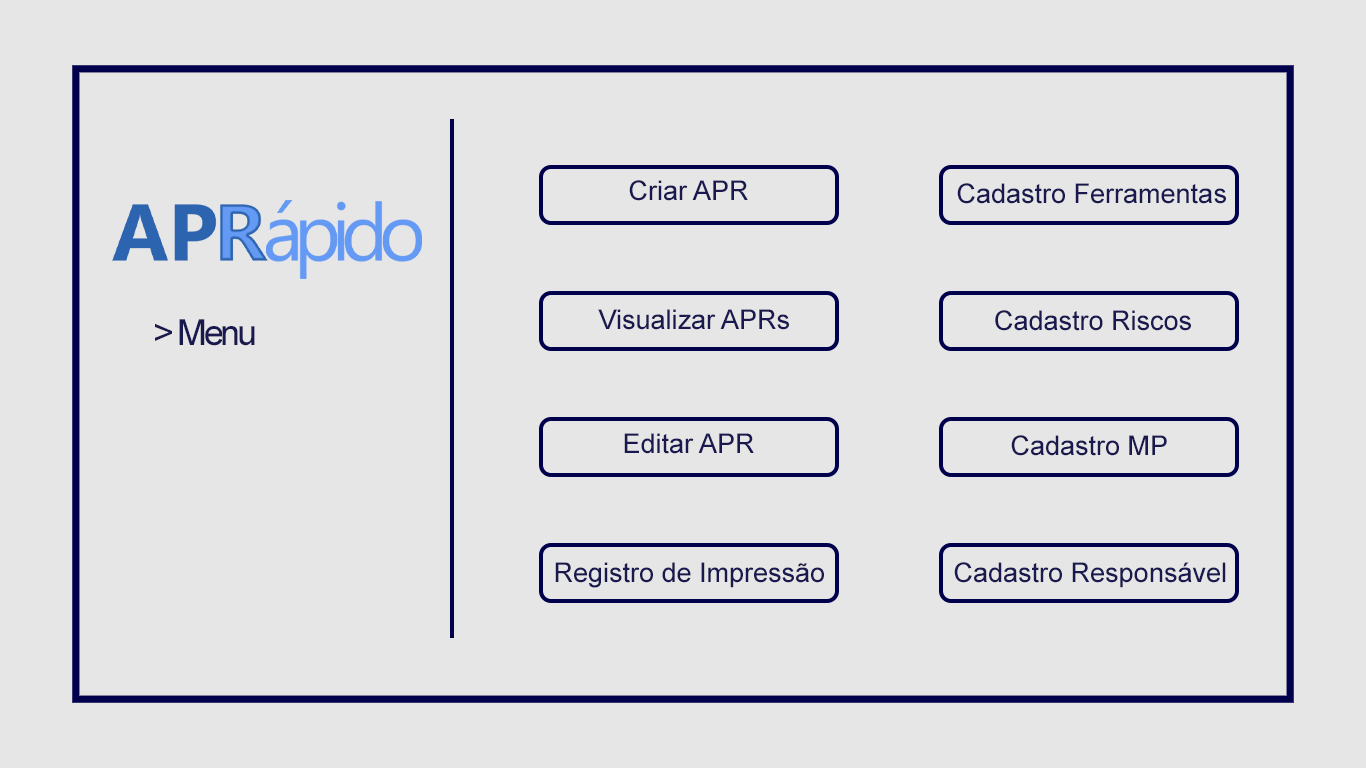
<style>
.page{position:relative;width:1366px;height:768px;background:#e6e6e6}
.page>*{position:absolute;margin:0}
.t1{font:27px "ArialMT";color:#19194f}
.t2{font:36px "ArialMT";letter-spacing:-0.095em;color:#19194f}
</style>
<div class="page">
<p class="t1" style="left:629px;top:180px;width:119px;height:21px">Criar APR</p>
<p class="t1" style="left:957px;top:183px;width:269px;height:21px">Cadastro Ferramentas</p>
<p class="t1" style="left:598px;top:309px;width:191px;height:21px">Visualizar APRs</p>
<p class="t1" style="left:995px;top:310px;width:196px;height:21px">Cadastro Riscos</p>
<p class="t2" style="left:155px;top:319px;width:100px;height:27px">&gt; Menu</p>
<p class="t1" style="left:624px;top:433px;width:130px;height:21px">Editar APR</p>
<p class="t1" style="left:1011px;top:435px;width:156px;height:21px">Cadastro MP</p>
<p class="t1" style="left:555px;top:562px;width:269px;height:26px">Registro de Impressão</p>
<p class="t1" style="left:954px;top:562px;width:272px;height:26px">Cadastro Responsável</p>
</div>
